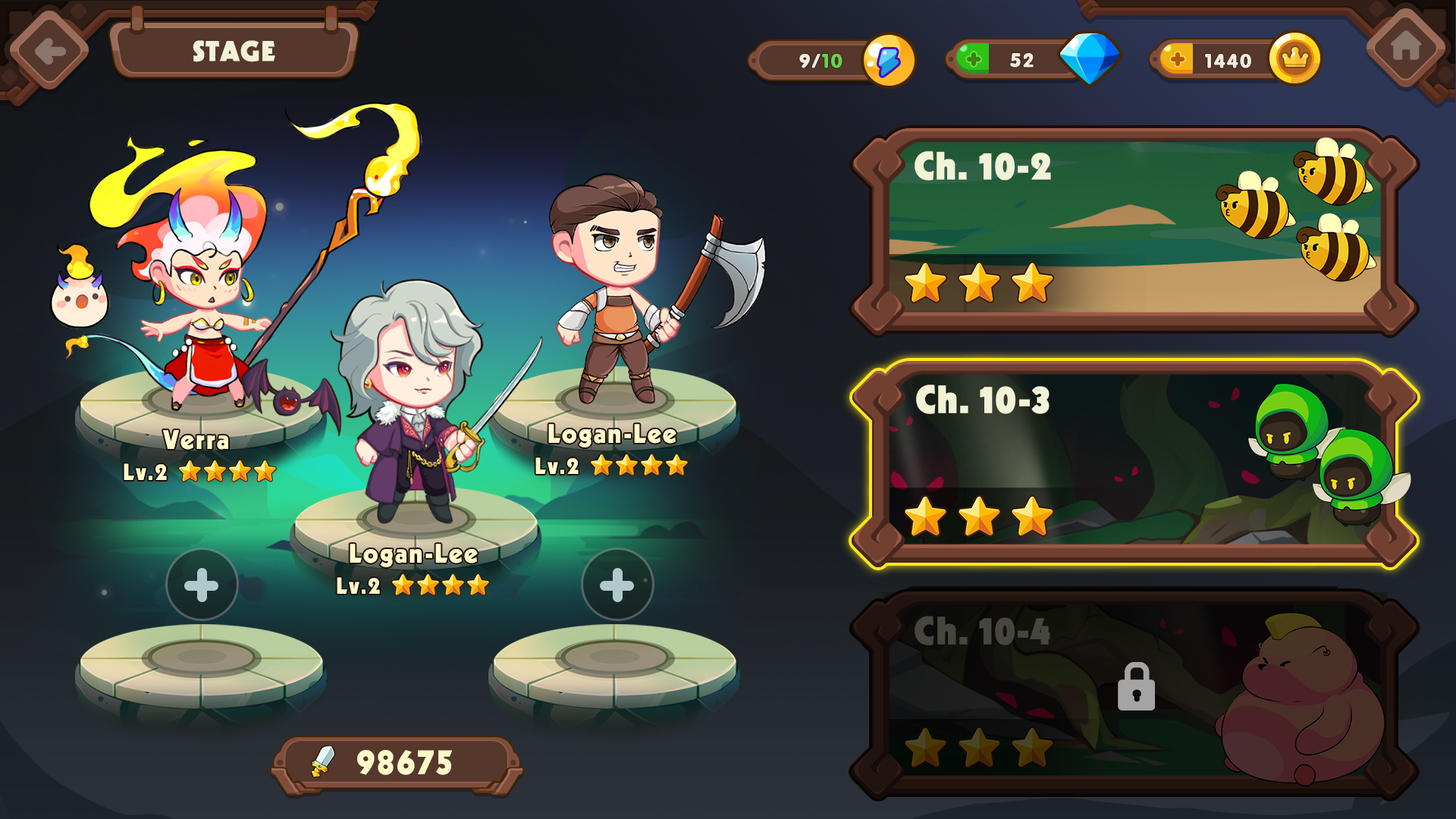
<style>
.page{position:relative;width:1456px;height:819px}
.page>*{position:absolute;margin:0}
.t1{font:27.3px "UTM-Kabel-KT";letter-spacing:0.02em;color:#f2f2d6;font-weight:bold}
.t2{font:19.3px "VNI-Vari";letter-spacing:0.06em;color:#f3eae1;font-weight:bold}
.t3{font:19.3px "VNI-Vari";letter-spacing:0.06em;color:#6bd050;font-weight:bold}
.t4{font:37.6px "UTM-Kabel-KT";letter-spacing:0.02em;color:#f2f2d6;font-weight:bold}
.t5{font:25.9px "UTM-Kabel-KT";letter-spacing:0.06em;color:#fff9c9}
.t6{font:22.7px "UTM-Kabel-KT";letter-spacing:0.06em;color:#fff9c9}
.t7{font:37.6px "UTM-Kabel-KT";letter-spacing:0.02em;color:#46463e;font-weight:bold}
</style>
<div class="page">
<p class="t1" style="left:193px;top:40px;width:82px;height:22px">STAGE</p>
<p class="t2" style="left:799px;top:54px;width:43px;height:14px">9/<span class="t3">10</span></p>
<p class="t2" style="left:1010px;top:53px;width:24px;height:14px">52</p>
<p class="t2" style="left:1205px;top:54px;width:46px;height:14px">1440</p>
<p class="t4" style="left:915px;top:151px;width:136px;height:29px">Ch. 10-2</p>
<p class="t4" style="left:916px;top:384px;width:134px;height:30px">Ch. 10-3</p>
<p class="t5" style="left:548px;top:424px;width:128px;height:23px">Logan-Lee</p>
<p class="t5" style="left:163px;top:430px;width:65px;height:20px">Verra</p>
<p class="t6" style="left:535px;top:457px;width:44px;height:17px">Lv.2</p>
<p class="t6" style="left:124px;top:463px;width:43px;height:17px">Lv.2</p>
<p class="t5" style="left:350px;top:544px;width:128px;height:23px">Logan-Lee</p>
<p class="t6" style="left:337px;top:577px;width:43px;height:17px">Lv.2</p>
<p class="t7" style="left:915px;top:616px;width:135px;height:29px">Ch. 10-4</p>
</div>
